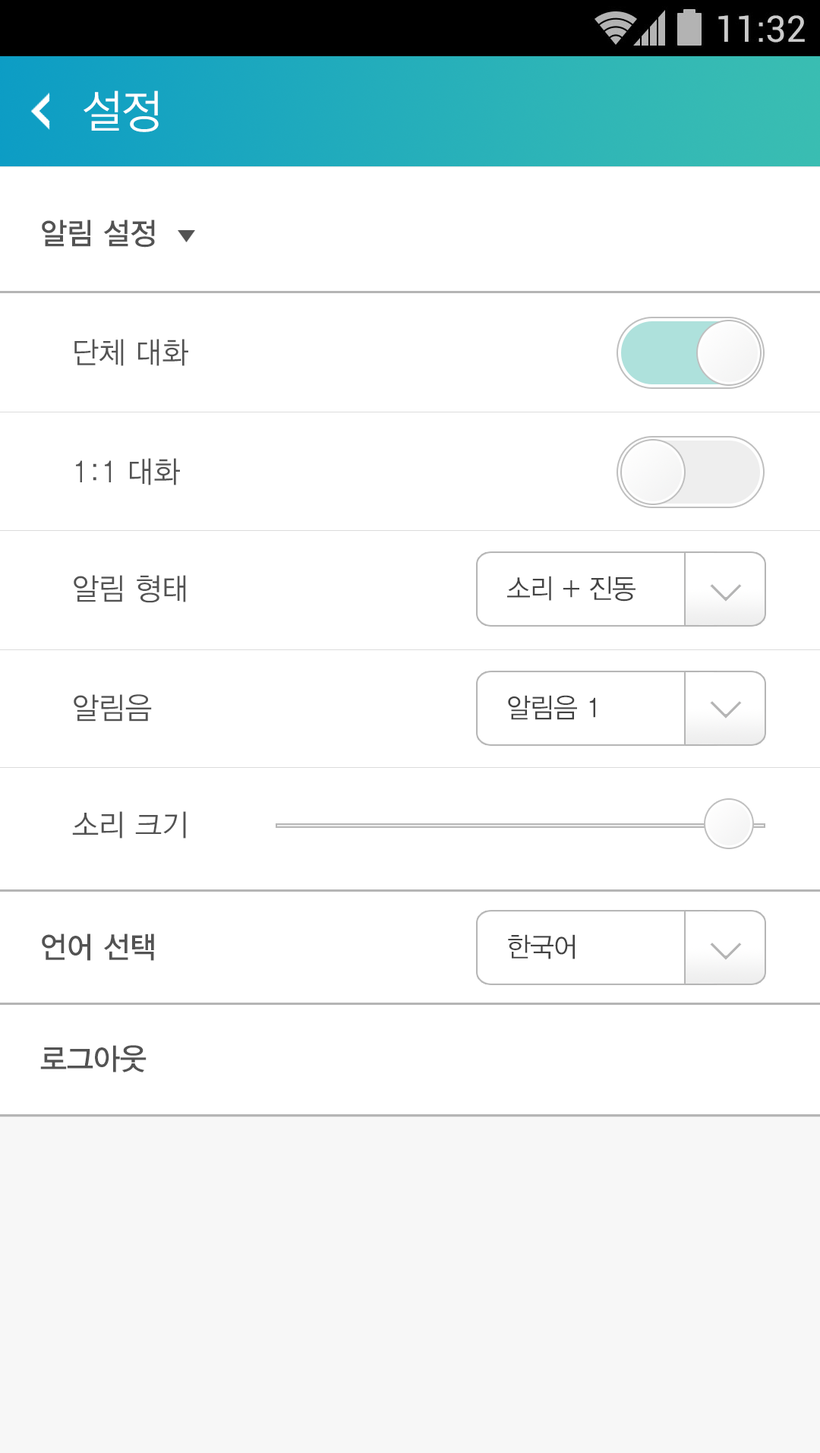
<style>
.page{position:relative;width:820px;height:1453px;background:#ffffff}
.page>*{position:absolute;margin:0}
.t1{font:45.6px "YDIYGO320";color:#ffffff;scale:0.95 1}
.t2{font:30.4px "YDIYGO330";color:#535353;scale:0.95 1}
.t3{font:30.4px "YDIYGO320";color:#535353;scale:0.95 1}
.t4{font:27.3px "YDIYGO320";color:#434343;scale:0.95 1}
</style>
<div class="page">
<p class="t1" style="left:84px;top:90px;width:75px;height:42px">설정</p>
<p class="t2" style="left:42px;top:220px;width:113px;height:28px">알림 설정</p>
<p class="t3" style="left:74px;top:339px;width:114px;height:27px">단체 대화</p>
<p class="t3" style="left:76px;top:458px;width:104px;height:27px">1:1 대화</p>
<p class="t3" style="left:74px;top:575px;width:112px;height:28px">알림 형태</p>
<p class="t4" style="left:507px;top:576px;width:129px;height:26px">소리 + 진동</p>
<p class="t3" style="left:74px;top:694px;width:78px;height:28px">알림음</p>
<p class="t4" style="left:508px;top:695px;width:88px;height:25px">알림음 1</p>
<p class="t3" style="left:72px;top:811px;width:114px;height:28px">소리 크기</p>
<p class="t2" style="left:42px;top:934px;width:112px;height:27px">언어 선택</p>
<p class="t4" style="left:508px;top:934px;width:67px;height:26px">한국어</p>
<p class="t2" style="left:40px;top:1045px;width:107px;height:28px">로그아웃</p>
</div>
